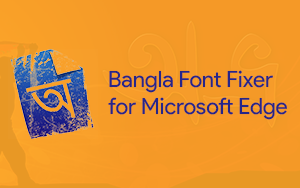
<style>
.page{position:relative;width:300px;height:188px;background:#f59927}
.page>*{position:absolute;margin:0}
.t1{font:22.4px "ProductSans-Regular";color:#262689}
</style>
<div class="page">
<p class="t1" style="left:108px;top:70px;width:179px;height:50px">Bangla Font Fixer<br>for Microsoft Edge</p>
</div>
